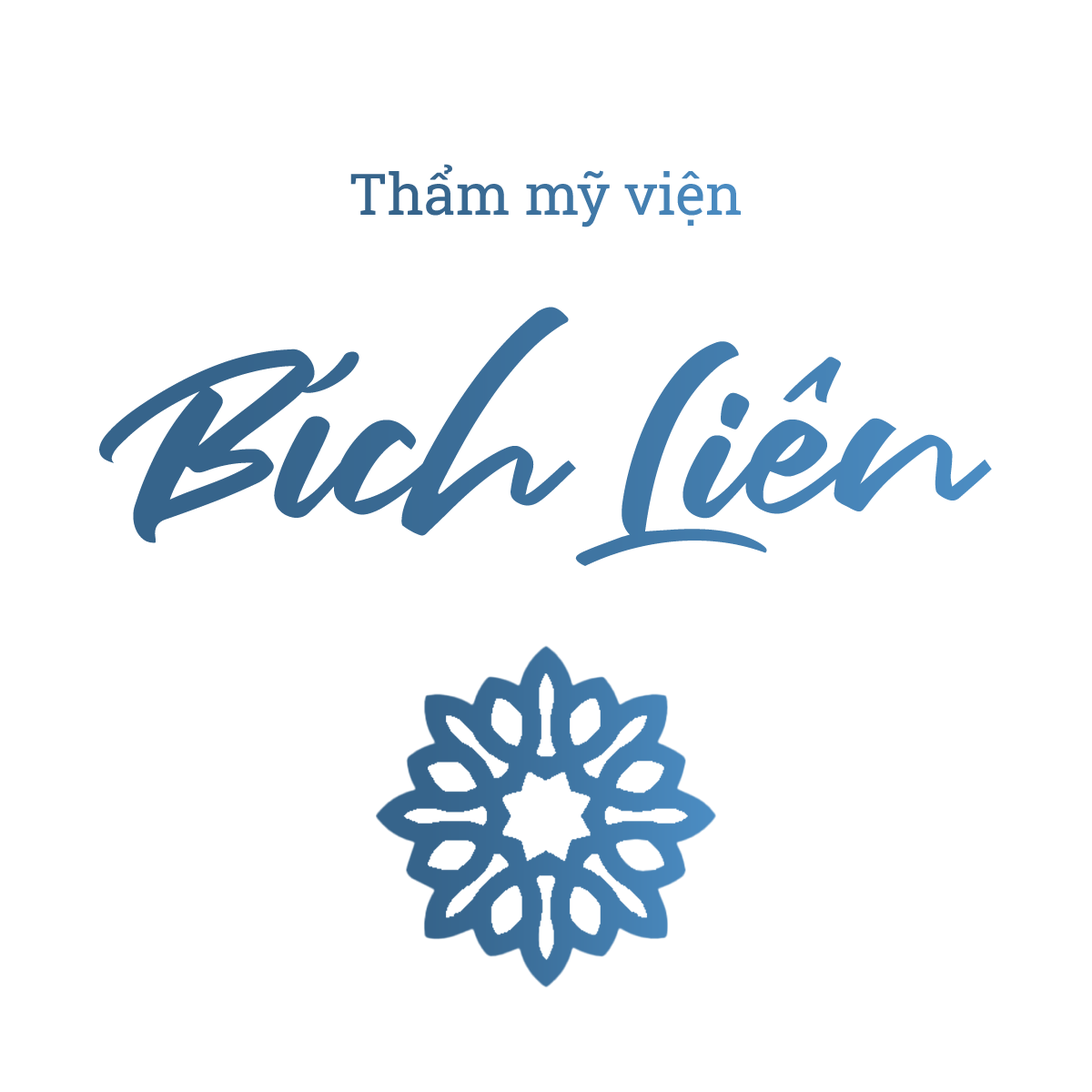
<style>
.page{position:relative;width:1092px;height:1092px;background:#ffffff}
.page>*{position:absolute;margin:0}
.t1{font:56.9px "RobotoSlab-Regular";color:#3e729f}
.t2{font:248.8px "LNTH-Fair-Prosper";color:#3b6e98}
</style>
<div class="page">
<p class="t1" style="left:350px;top:164px;width:391px;height:63px">Thẩm mỹ viện</p>
<p class="t2" style="left:99px;top:307px;width:893px;height:259px">Bích Liên</p>
</div>
